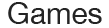
<style>
.page{position:relative;width:109px;height:28px;background:#ffffff}
.page>*{position:absolute;margin:0}
.t1{font:30px "HelveticaNeue";color:#242424}
</style>
<div class="page">
<p class="t1" style="left:8px;top:2px;width:94px;height:22px">Games</p>
</div>
